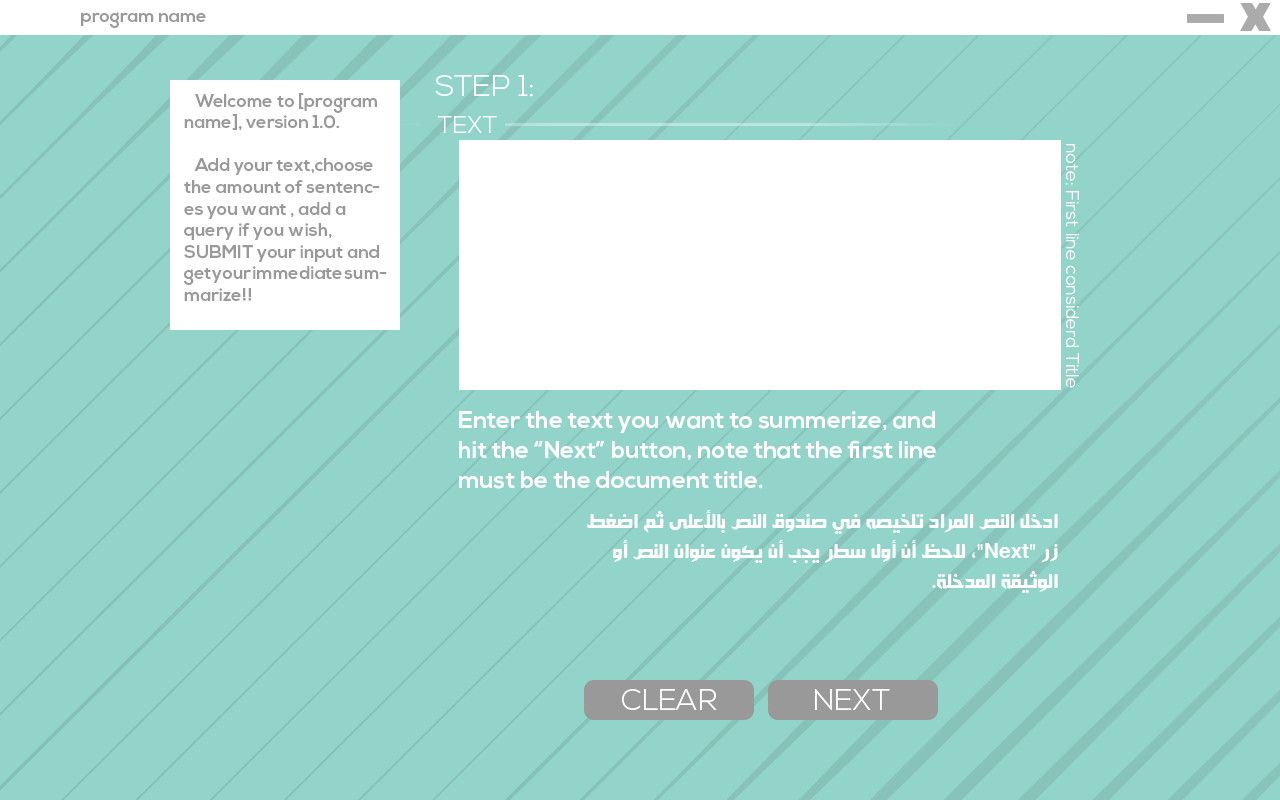
<style>
.page{position:relative;width:1280px;height:800px;background:#92d4ca}
.page>*{position:absolute;margin:0}
.t1{font:18px "NexaBold";color:#999999}
.t2{font:30px "NexaLight";color:#ffffff}
.t3{font:24px "NexaLight";color:#ffffff;text-transform:uppercase}
.t4{font:18px "NexaLight";color:#ffffff}
.t5{font:24px/30px "NexaBold";color:#ffffff}
.t6{font:24px/30px "HacenSamra";color:#ffffff}
.t7{font:30px "NexaLight";color:#ffffff;text-transform:uppercase}
</style>
<div class="page">
<p class="t1" style="left:81px;top:12px;width:125px;height:16px">program name</p>
<p class="t2" style="left:435px;top:75px;width:98px;height:22px">STEP 1:</p>
<p class="t1" style="left:184px;top:93px;width:203px;height:208px">Welcome to [program name], version 1.0.<br><br>   Add your text,choose the amount of sentences you want , add a query if you wish, SUBMIT your input and get your immediate summarize!!</p>
<p class="t3" style="left:437px;top:116px;width:60px;height:17px">TEXT</p>
<p class="t4" style="left:1065px;top:144px;width:14px;height:244px;rotate:90deg">note: First line considerd Title</p>
<p class="t5" style="left:459px;top:411px;width:477px;height:78px">Enter the text you want to summerize, and<br>hit the “Next” button, note that the first line<br>must be the document title.</p>
<p class="t6" style="left:587px;top:510px;width:471px;height:83px">ادخل النص المراد تلخيصه في صندوق النص بالأعلى ثم اضغط<br>زر “Next”، لاحظ أن أول سطر يجب أن يكون عنوان النص أو<br>الوثيقة المدخلة.</p>
<p class="t7" style="left:622px;top:689px;width:95px;height:21px">Clear</p>
<p class="t7" style="left:815px;top:689px;width:75px;height:21px">Next</p>
</div>
